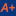
<style>
.page{position:relative;width:16px;height:16px;background:#09357b}
.page>*{position:absolute;margin:0}
.t1{font:11.5px "Arial-ItalicMT";color:#f1632a}
</style>
<div class="page">
<p class="t1" style="left:0px;top:3px;width:15px;height:9px">A+</p>
</div>
